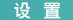
<style>
.page{position:relative;width:73px;height:20px}
.page>*{position:absolute;margin:0}
.t1{font:18px "LiHeiPro";color:#ffffff}
</style>
<div class="page">
<p class="t1" style="left:14px;top:2px;width:47px;height:17px">设  置</p>
</div>
